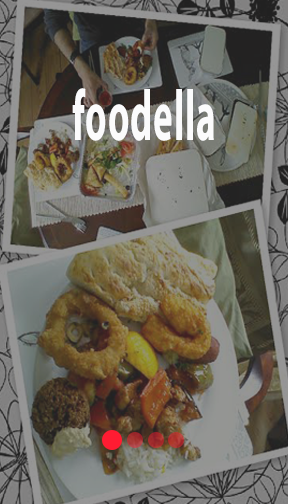
<style>
.page{position:relative;width:288px;height:504px}
.page>*{position:absolute;margin:0}
.t1{font:71.8px "MyriadPro-Bold";letter-spacing:0.025em;color:#fbfbfc;scale:0.52 1}
</style>
<div class="page">
<p class="t1" style="left:72px;top:88px;width:142px;height:53px">foodella</p>
</div>
